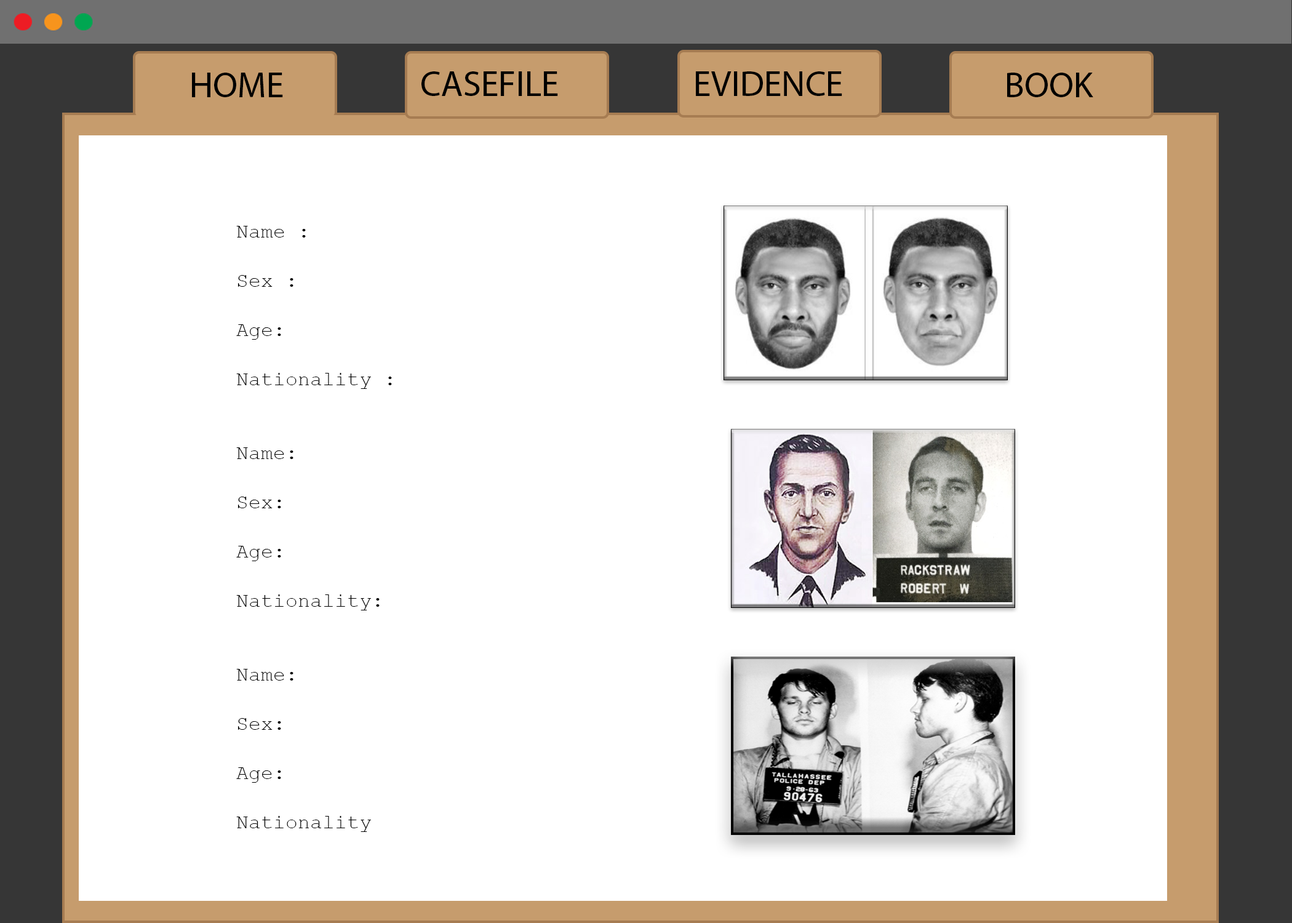
<style>
.page{position:relative;width:1292px;height:923px;background:#ffffff}
.page>*{position:absolute;margin:0}
.t1{font:35.9px "MyriadPro-Regular";color:#000000}
.t2{font:20.5px "CourierNewPSMT";color:#000000}
</style>
<div class="page">
<p class="t1" style="left:192px;top:73px;width:91px;height:24px">HOME</p>
<p class="t1" style="left:421px;top:71px;width:137px;height:25px">CASEFILE</p>
<p class="t1" style="left:696px;top:71px;width:146px;height:25px">EVIDENCE</p>
<p class="t1" style="left:1007px;top:73px;width:86px;height:24px">BOOK</p>
<p class="t2" style="left:236px;top:226px;width:156px;height:606px">Name :<br><br>Sex : <br><br>Age:<br><br>Nationality :  <br><br><br>Name: <br><br>Sex:<br><br>Age:<br><br>Nationality:<br><br><br>Name:<br><br>Sex:<br><br>Age:<br><br>Nationality</p>
</div>
